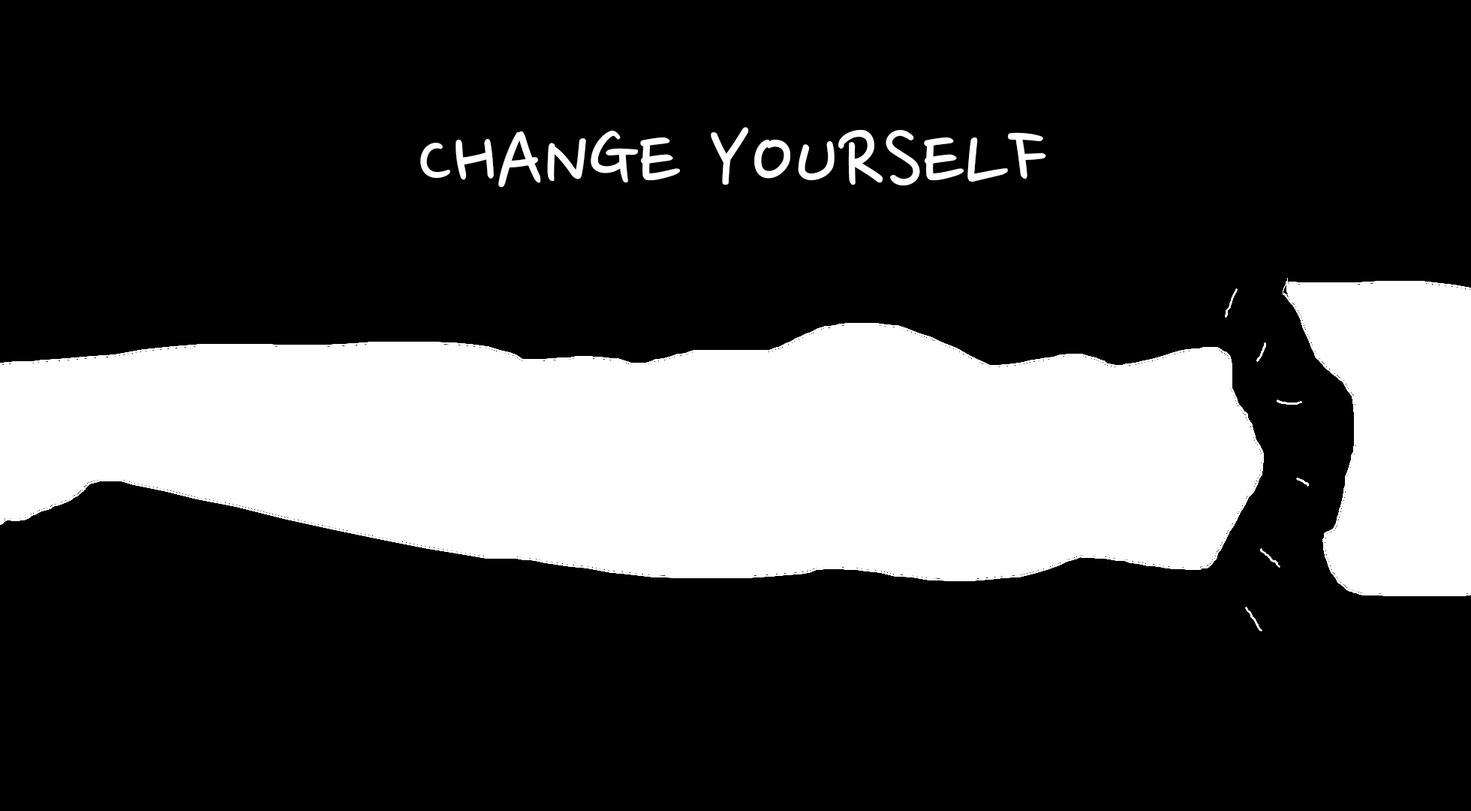
<style>
.page{position:relative;width:1471px;height:811px;background:#000000}
.page>*{position:absolute;margin:0}
.t1{font:100.1px "NanumPen";color:#ffffff}
</style>
<div class="page">
<p class="t1" style="left:420px;top:127px;width:626px;height:61px">CHANGE YOURSELF</p>
</div>
